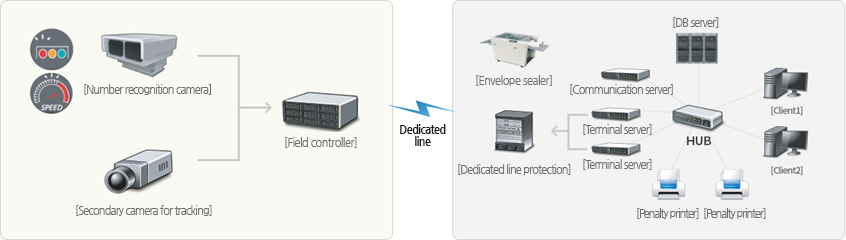
<style>
.page{position:relative;width:846px;height:240px;background:#f9faf4}
.page>*{position:absolute;margin:0}
.t1{font:11px "NanumGothic";letter-spacing:-0.075em;color:#6e6e6e}
.t2{font:11px "NanumGothic";letter-spacing:-0.05em;color:#6e6e6e}
.t3{font:11px/12px "NanumGothicBold";letter-spacing:-0.05em;color:#1a1a1a}
.t4{font:11px "NanumGothic";letter-spacing:-0.1em;color:#6e6e6e}
</style>
<div class="page">
<p class="t1" style="left:673px;top:17px;width:46px;height:11px">[DB server]</p>
<p class="t2" style="left:476px;top:75px;width:76px;height:11px">[Envelope sealer]</p>
<p class="t1" style="left:84px;top:84px;width:127px;height:11px">[Number recognition camera]</p>
<p class="t1" style="left:570px;top:84px;width:103px;height:11px">[Communication server]</p>
<p class="t3" style="left:400px;top:124px;width:46px;height:22px;text-align:center">Dedicated<br>line</p>
<p class="t1" style="left:583px;top:124px;width:69px;height:11px">[Terminal server]</p>
<p class="t2" style="left:285px;top:137px;width:72px;height:11px">[Field controller]</p>
<p class="t1" style="left:583px;top:159px;width:69px;height:11px">[Terminal server]</p>
<p class="t1" style="left:458px;top:164px;width:113px;height:11px">[Dedicated line protection]</p>
<p class="t1" style="left:76px;top:205px;width:136px;height:11px">[Secondary camera for tracking]</p>
<p class="t4" style="left:637px;top:208px;width:62px;height:11px">[Penalty printer]</p>
<p class="t4" style="left:704px;top:208px;width:62px;height:11px">[Penalty printer]</p>
</div>
